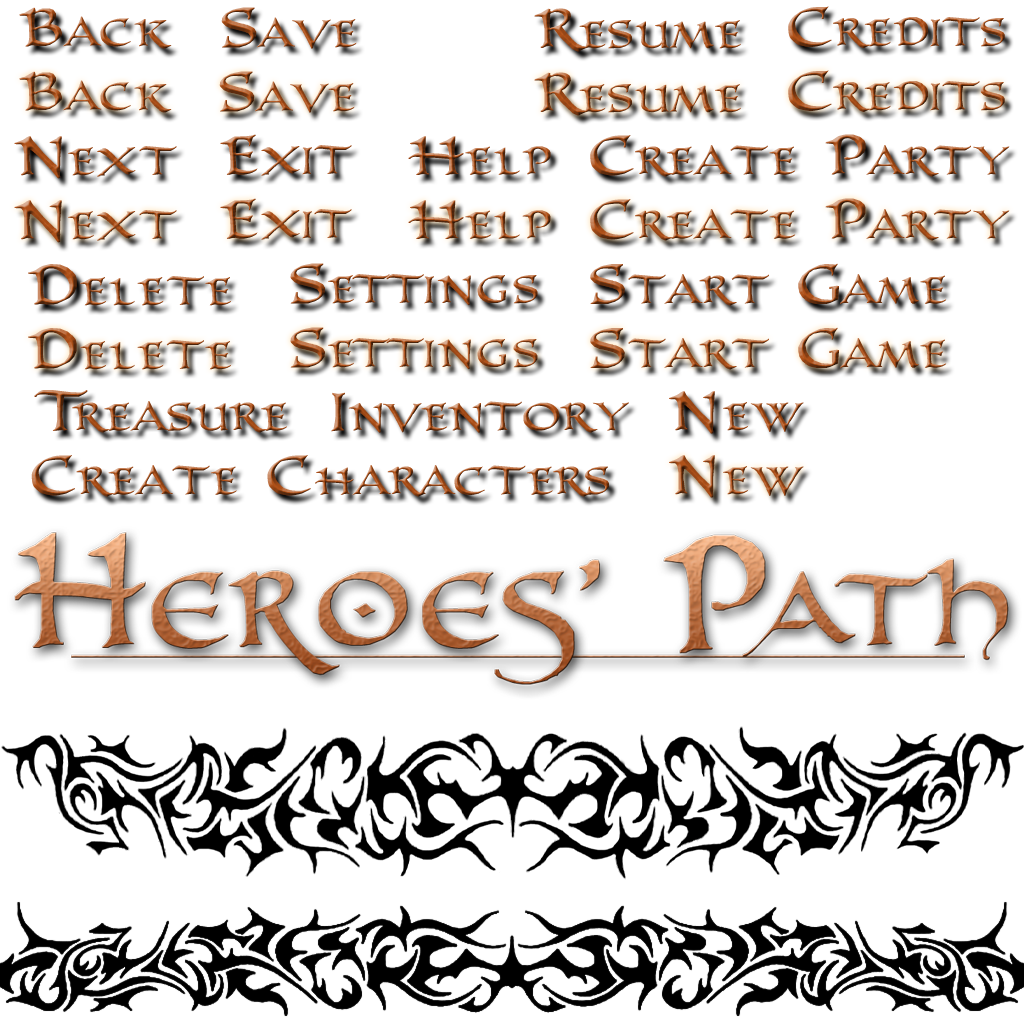
<style>
.page{position:relative;width:1024px;height:1024px;background:#ffffff}
.page>*{position:absolute;margin:0}
.t1{font:57.6px "PR-UncialAltCaps2";font-variant:small-caps;scale:0.83 1}
.t2{font:57.6px "PR-UncialAltCaps2";letter-spacing:0.05em;font-variant:small-caps;scale:0.83 1}
.t3{font:57.6px "PR-UncialAltCaps2";letter-spacing:-0.1em;font-variant:small-caps;scale:0.83 1}
.t4{font:57.6px "PR-UncialAltCaps2";letter-spacing:0.075em;font-variant:small-caps;scale:0.83 1}
.t5{font:57.6px "PR-UncialAltCaps2";letter-spacing:0.1em;font-variant:small-caps;scale:0.83 1}
.t6{font:57.6px "PR-UncialAltCaps2";letter-spacing:-0.3em;font-variant:small-caps;scale:0.83 1}
.t7{font:57.6px "PR-UncialAltCaps2";letter-spacing:0.1em;font-variant:small-caps;scale:0.81 1}
.t8{font:57.6px "PR-UncialAltCaps2";letter-spacing:0.05em;font-variant:small-caps;scale:0.81 1}
.t9{font:57.6px "PR-UncialAltCaps2";font-variant:small-caps;scale:0.81 1}
</style>
<div class="page">
<p class="t1" style="left:788px;top:6px;width:217px;height:42px">Credits</p>
<p class="t1" style="left:19px;top:7px;width:153px;height:42px">Back</p>
<p class="t1" style="left:221px;top:7px;width:136px;height:42px">Save</p>
<p class="t1" style="left:534px;top:8px;width:207px;height:44px">Resume</p>
<p class="t1" style="left:19px;top:71px;width:153px;height:42px">Back</p>
<p class="t1" style="left:219px;top:71px;width:136px;height:42px">Save</p>
<p class="t1" style="left:534px;top:72px;width:207px;height:44px">Resume</p>
<p class="t1" style="left:788px;top:70px;width:217px;height:42px">Credits</p>
<p class="t1" style="left:14px;top:136px;width:163px;height:43px"><span class="t2">N</span>ext</p>
<p class="t1" style="left:220px;top:134px;width:132px;height:42px">Exit</p>
<p class="t1" style="left:408px;top:136px;width:143px;height:39px">Help</p>
<p class="t1" style="left:590px;top:134px;width:420px;height:43px">Create Party</p>
<p class="t1" style="left:220px;top:198px;width:132px;height:42px">Exit</p>
<p class="t1" style="left:590px;top:198px;width:420px;height:43px">Create Party</p>
<p class="t1" style="left:14px;top:200px;width:163px;height:43px"><span class="t2">N</span>ext</p>
<p class="t1" style="left:408px;top:200px;width:143px;height:39px">Help</p>
<p class="t1" style="left:28px;top:264px;width:204px;height:42px">Delete</p>
<p class="t3" style="left:290px;top:263px;width:248px;height:43px"><span class="t1">S</span>et<span class="t1">t</span><span class="t4">in</span><span class="t5">g</span><span class="t1">s</span></p>
<p class="t1" style="left:590px;top:263px;width:357px;height:43px">Start Game</p>
<p class="t1" style="left:28px;top:328px;width:204px;height:42px">Delete</p>
<p class="t3" style="left:290px;top:327px;width:248px;height:43px"><span class="t1">S</span>et<span class="t1">t</span><span class="t4">in</span><span class="t5">g</span><span class="t1">s</span></p>
<p class="t1" style="left:590px;top:327px;width:357px;height:43px">Start Game</p>
<p class="t1" style="left:34px;top:390px;width:253px;height:43px"><span class="t6">T</span>reasure</p>
<p class="t1" style="left:331px;top:392px;width:298px;height:41px"><span class="t4">I</span>nventory</p>
<p class="t7" style="left:669px;top:391px;width:135px;height:43px">N<span class="t8">e</span><span class="t9">w</span></p>
<p class="t1" style="left:31px;top:455px;width:578px;height:42px">Create Characters</p>
<p class="t7" style="left:669px;top:455px;width:135px;height:43px">N<span class="t8">e</span><span class="t9">w</span></p>
</div>
